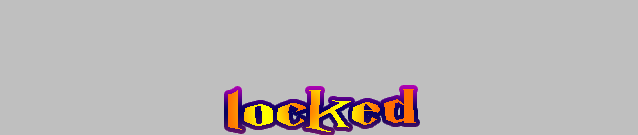
<style>
.page{position:relative;width:638px;height:135px;background:#bfbfbf}
.page>*{position:absolute;margin:0}
.t1{font:55.8px "HarryP";scale:2.02 1}
</style>
<div class="page">
<p class="t1" style="left:228px;top:89px;width:188px;height:43px">locked</p>
</div>
